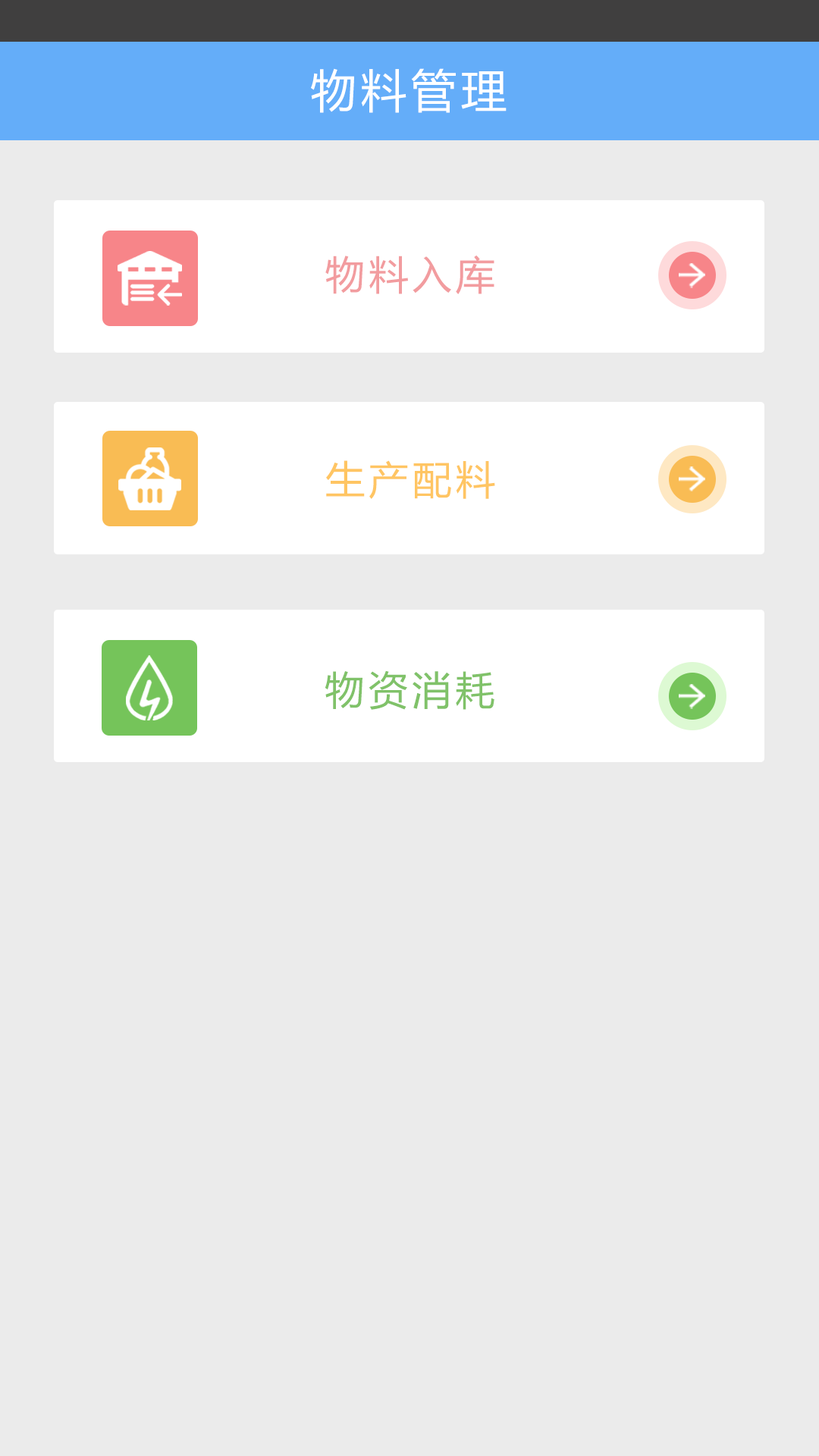
<style>
.page{position:relative;width:819px;height:1456px;background:#ebebeb}
.page>*{position:absolute;margin:0}
.t1{font:45.5px "MicrosoftYaHei";letter-spacing:0.1em;color:#ffffff}
.t2{font:39.4px "MicrosoftYaHei";letter-spacing:0.1em;color:#f29c9f}
.t3{font:39.4px "MicrosoftYaHei";letter-spacing:0.1em;color:#ffc563}
.t4{font:39.4px "MicrosoftYaHei";letter-spacing:0.1em;color:#80c269}
</style>
<div class="page">
<p class="t1" style="left:311px;top:68px;width:196px;height:45px">物料管理</p>
<p class="t2" style="left:325px;top:255px;width:169px;height:39px">物料入库</p>
<p class="t3" style="left:326px;top:460px;width:169px;height:39px">生产配料</p>
<p class="t4" style="left:325px;top:670px;width:169px;height:40px">物资消耗</p>
</div>
